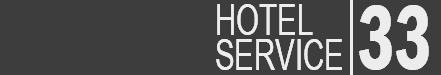
<style>
.page{position:relative;width:441px;height:75px;background:#3d3d3d}
.page>*{position:absolute;margin:0}
.t1{font:43.5px/35.2px "ArialNarrow";color:#ededed;scale:0.83 1}
.t2{font:43.5px/35.2px "ArialNarrow";letter-spacing:0.004em;color:#ededed;scale:0.83 1}
.t3{font:94.8px "FranklinGothic-DemiCond";color:#ededed;scale:0.77 1}
</style>
<div class="page">
<p class="t1" style="left:216px;top:4px;width:126px;height:66px"><span class="t2">HOTEL<br></span>SERVICE</p>
<p class="t3" style="left:359px;top:5px;width:70px;height:65px">33</p>
</div>
